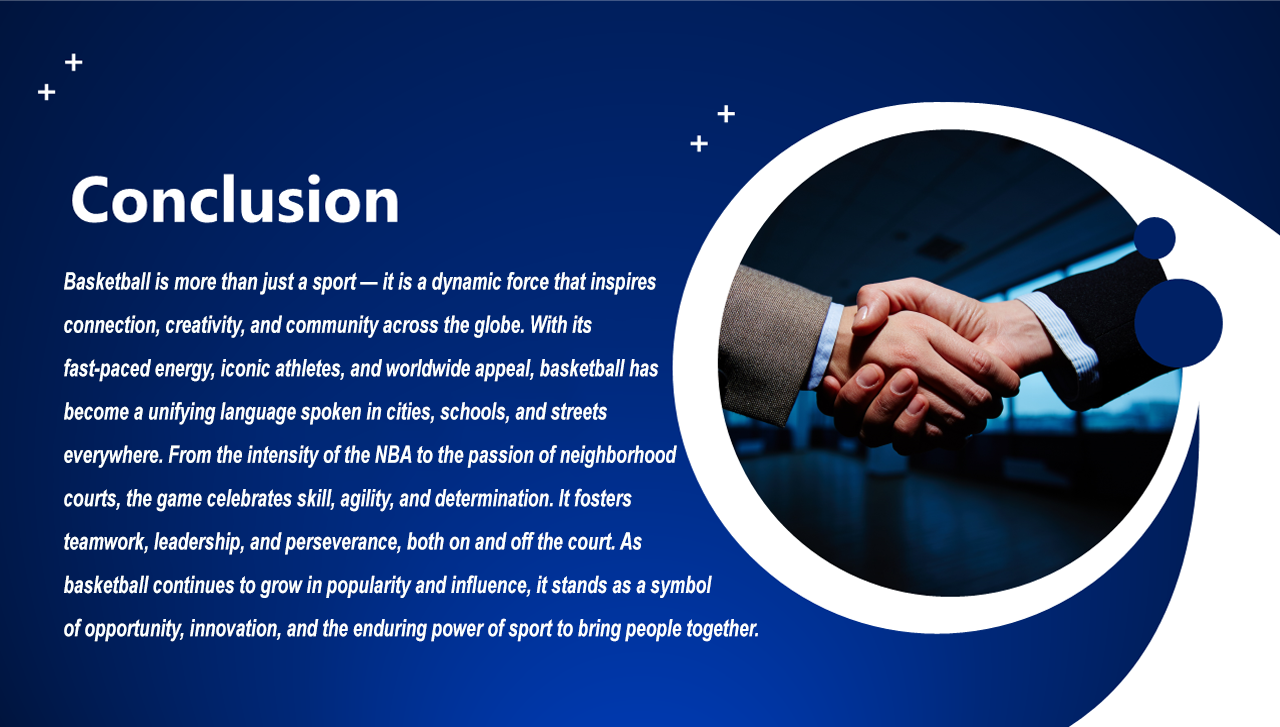
<style>
.page{position:relative;width:1280px;height:727px}
.page>*{position:absolute;margin:0}
.t1{font:24px/43.4px "Arial-BoldItalicMT";color:#fbffff;scale:0.72 1}
</style>
<div class="page">
<p class="t1" style="left:64px;top:272px;width:694px;height:370px">Basketball is more than just a sport — it is a dynamic force that inspires<br>connection, creativity, and community across the globe. With its <br>fast-paced energy, iconic athletes, and worldwide appeal, basketball has<br>become a unifying language spoken in cities, schools, and streets <br>everywhere. From the intensity of the NBA to the passion of neighborhood <br>courts, the game celebrates skill, agility, and determination. It fosters <br>teamwork, leadership, and perseverance, both on and off the court. As <br>basketball continues to grow in popularity and influence, it stands as a symbol <br>of opportunity, innovation, and the enduring power of sport to bring people together.</p>
</div>
